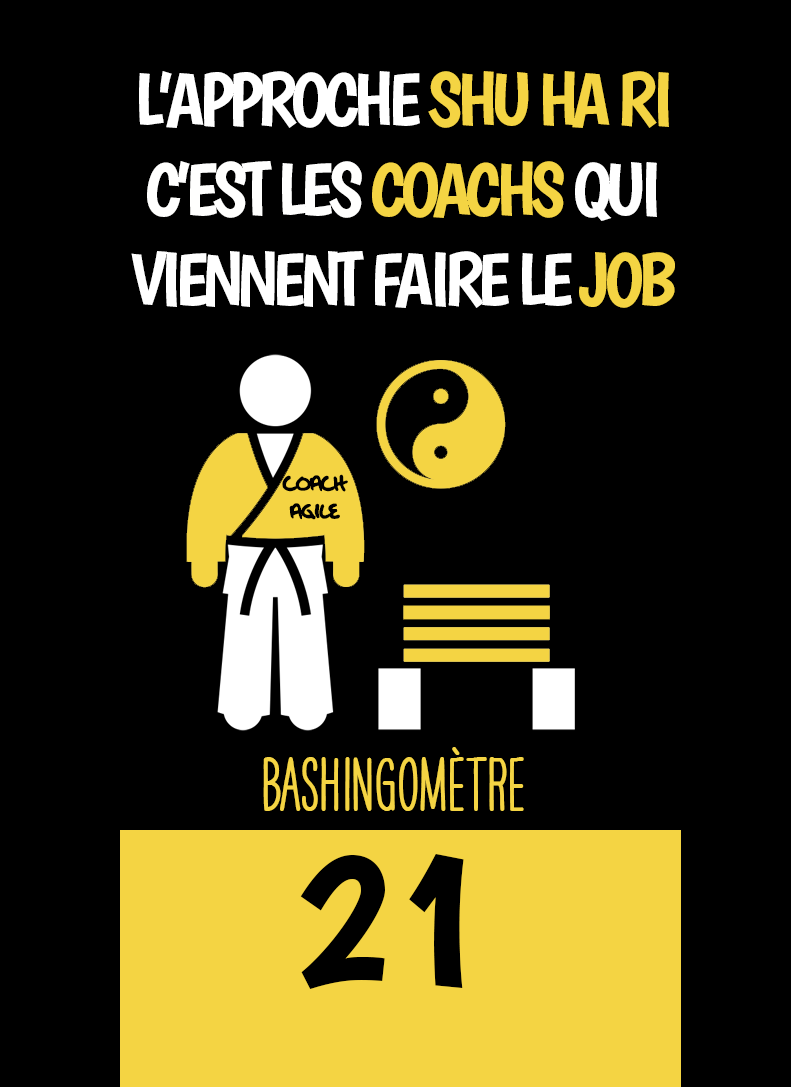
<style>
.page{position:relative;width:791px;height:1087px;background:#000000}
.page>*{position:absolute;margin:0}
.t1{font:75px "Boogaloo-Regular";letter-spacing:-0.08em;color:#ffffff}
.t2{font:75px "Boogaloo-Regular";letter-spacing:-0.08em;color:#f4d443}
.t3{font:75px "Boogaloo-Regular";letter-spacing:-0.08em;color:#fffffe}
.t4{font:25px/27.5px "OakStreetW01-Regular";letter-spacing:-0.08em;color:#000000}
.t5{font:66.7px "HAVEANICEDAYTallW04-Bold";color:#f4d443}
.t6{font:200px "Boogaloo-Regular";color:#000000}
</style>
<div class="page">
<p class="t1" style="left:131px;top:71px;width:544px;height:237px;text-align:center">L’APPROCHE <span class="t2">SHU HA RI<br></span><span class="t3">C’EST LES</span><span class="t2"> COACHS </span>QUI VIENNENT FAIRE LE<span class="t2"> JOB</span></p>
<p class="t4" style="left:282px;top:474px;width:66px;height:46px;text-align:center">COACH AGILE</p>
<p class="t5" style="left:263px;top:747px;width:261px;height:64px">BASHINgomètre</p>
<p class="t6" style="left:300px;top:854px;width:164px;height:135px">21</p>
</div>
